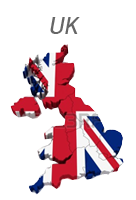
<style>
.page{position:relative;width:136px;height:200px;background:#ffffff}
.page>*{position:absolute;margin:0}
.t1{font:24px "TrebuchetMS-Italic";color:#666666}
</style>
<div class="page">
<p class="t1" style="left:50px;top:17px;width:30px;height:17px">UK</p>
</div>
